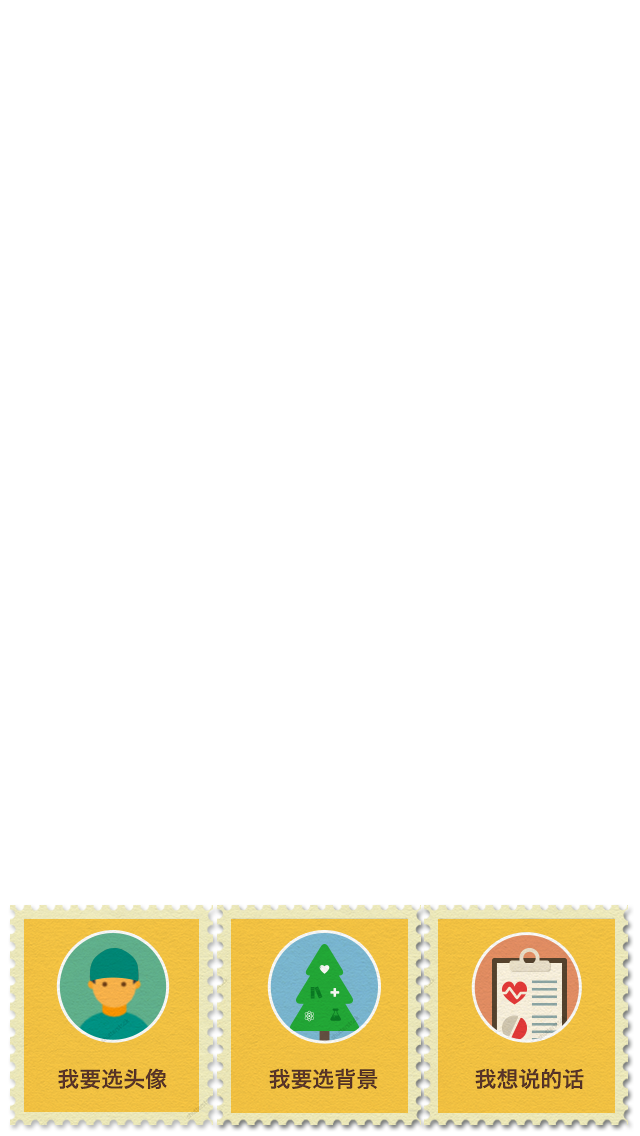
<style>
.page{position:relative;width:640px;height:1136px;background:#ffffff}
.page>*{position:absolute;margin:0}
.t1{font:22px "HiraginoSansGB-W6";color:#62392e}
</style>
<div class="page">
<p class="t1" style="left:58px;top:1068px;width:109px;height:22px">我要选头像</p>
<p class="t1" style="left:269px;top:1068px;width:109px;height:22px">我要选背景</p>
<p class="t1" style="left:475px;top:1068px;width:109px;height:21px">我想说的话</p>
</div>
